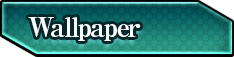
<style>
.page{position:relative;width:234px;height:57px}
.page>*{position:absolute;margin:0}
.t1{font:27px "RyuminPro-ExBold";letter-spacing:-0.08em;color:#ffffff}
</style>
<div class="page">
<p class="t1" style="left:28px;top:17px;width:113px;height:24px">Wallpaper</p>
</div>
